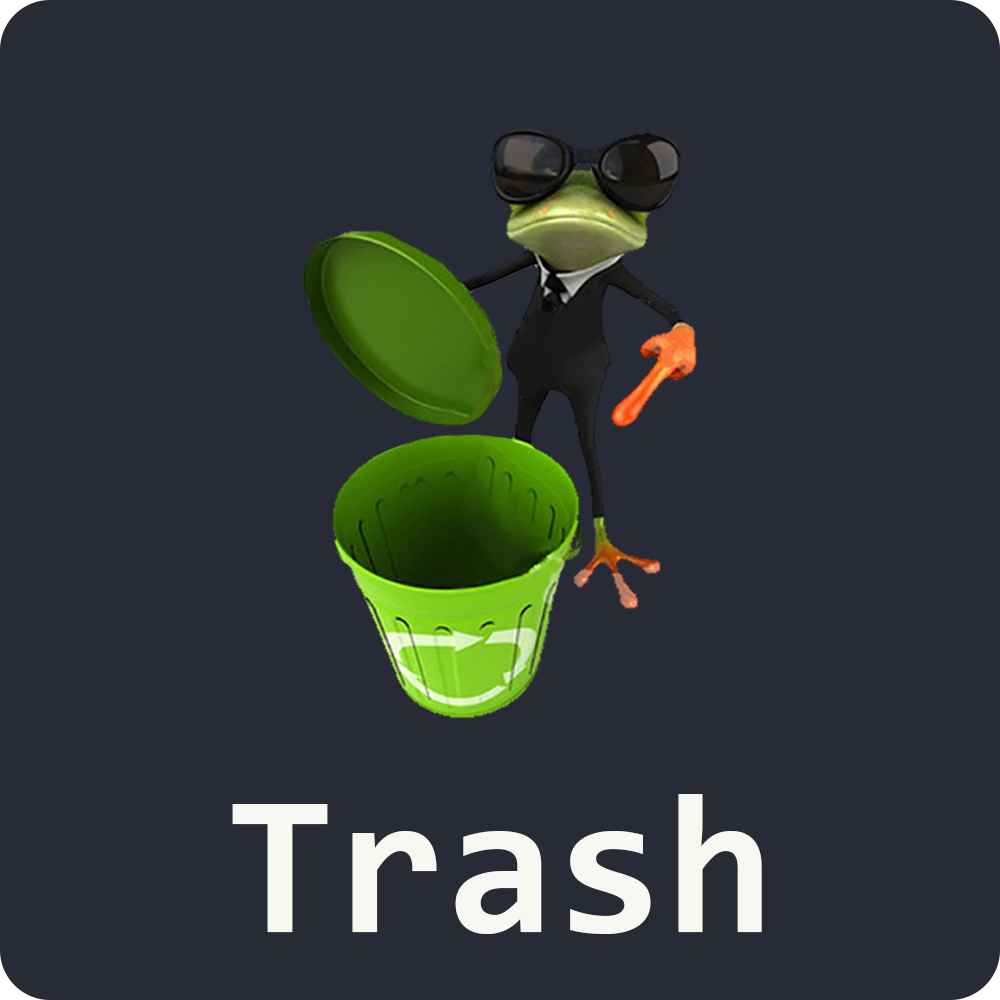
<style>
.page{position:relative;width:1000px;height:1000px;background:#282a36}
.page>*{position:absolute;margin:0}
.t1{font:200px "Consolas-Bold";color:#f8f8f2}
</style>
<div class="page">
<p class="t1" style="left:232px;top:794px;width:530px;height:140px">Trash</p>
</div>
